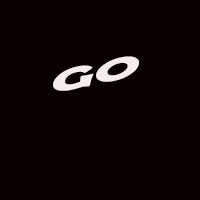
<style>
.page{position:relative;width:200px;height:200px;background:#070101}
.page>*{position:absolute;margin:0}
.t1{font:30.8px "BerlinSansFBDemi-Bold";color:#f3edec;font-style:italic;scale:2.02 1}
</style>
<div class="page">
<p class="t1" style="left:53px;top:56px;width:86px;height:35px;rotate:-11deg">GO</p>
</div>
